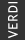
<style>
.page{position:relative;width:25px;height:40px;background:#333333}
.page>*{position:absolute;margin:0}
.t1{font:13px "TrebuchetMS";letter-spacing:0.07em;color:#ffffff}
</style>
<div class="page">
<p class="t1" style="left:8px;top:2px;width:10px;height:37px;rotate:-90deg">VERDI</p>
</div>
